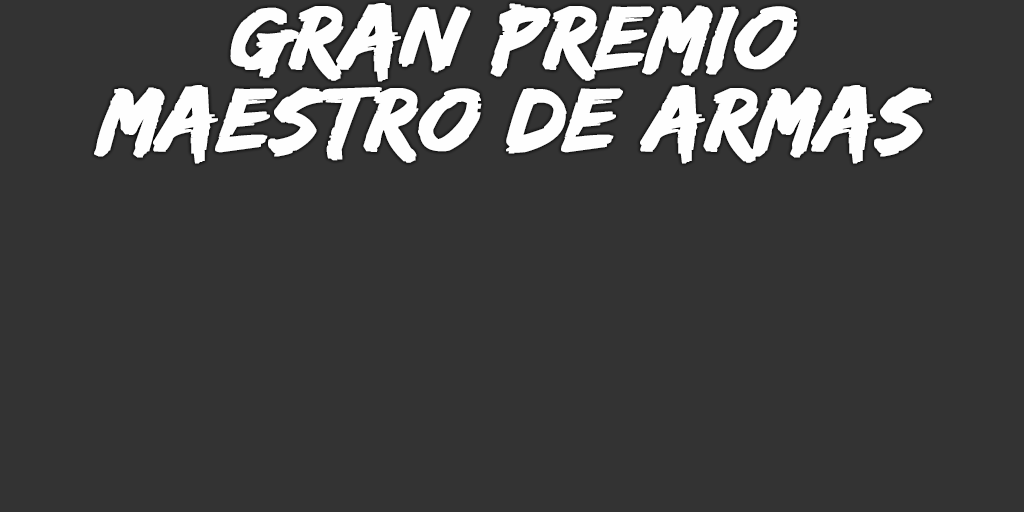
<style>
.page{position:relative;width:1024px;height:512px;background:#333333}
.page>*{position:absolute;margin:0}
.t1{font:93px/82px "EdoSZ";color:#fefefe;font-weight:bold;font-style:italic;scale:1.04 1}
</style>
<div class="page">
<p class="t1" style="left:94px;top:3px;width:838px;height:161px;text-align:center">gran premio<br>maestro de armas</p>
</div>
